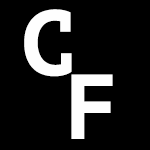
<style>
.page{position:relative;width:150px;height:150px;background:#000000}
.page>*{position:absolute;margin:0}
.t1{font:91.7px "PTMono-Bold";color:#fefefe}
</style>
<div class="page">
<p class="t1" style="left:24px;top:9px;width:48px;height:68px">C</p>
<p class="t1" style="left:71px;top:74px;width:42px;height:65px">F</p>
</div>
